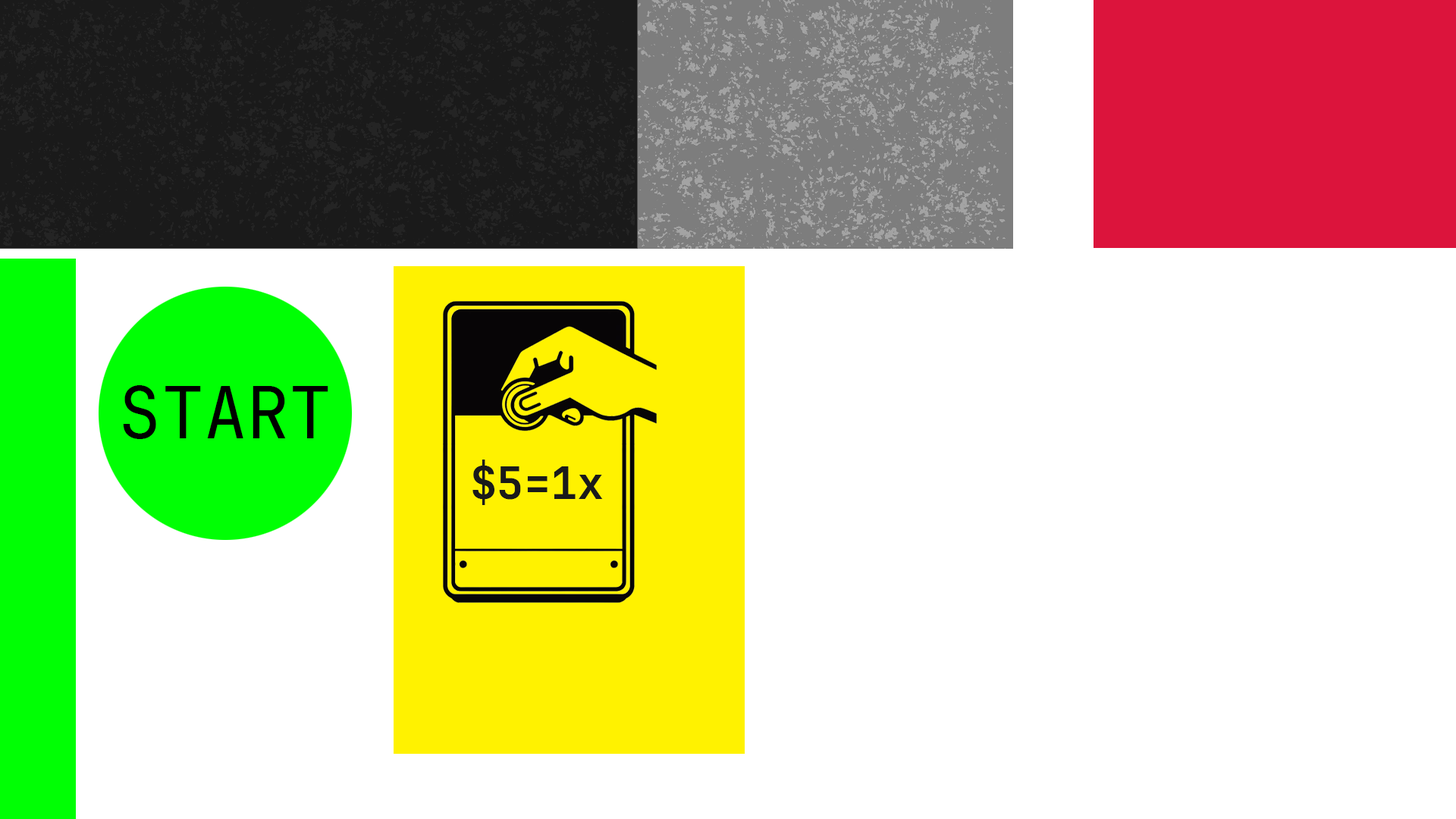
<style>
.page{position:relative;width:1456px;height:819px;background:#ffffff}
.page>*{position:absolute;margin:0}
.t1{font:71.2px "JetBrainsMonoNF-Regular";color:#000000}
.t2{font:44.7px "JetBrainsMonoNF-Bold";color:#1a1a1a}
</style>
<div class="page">
<p class="t1" style="left:123px;top:385px;width:205px;height:54px">START</p>
<p class="t2" style="left:472px;top:460px;width:131px;height:45px">$5=1x</p>
</div>
